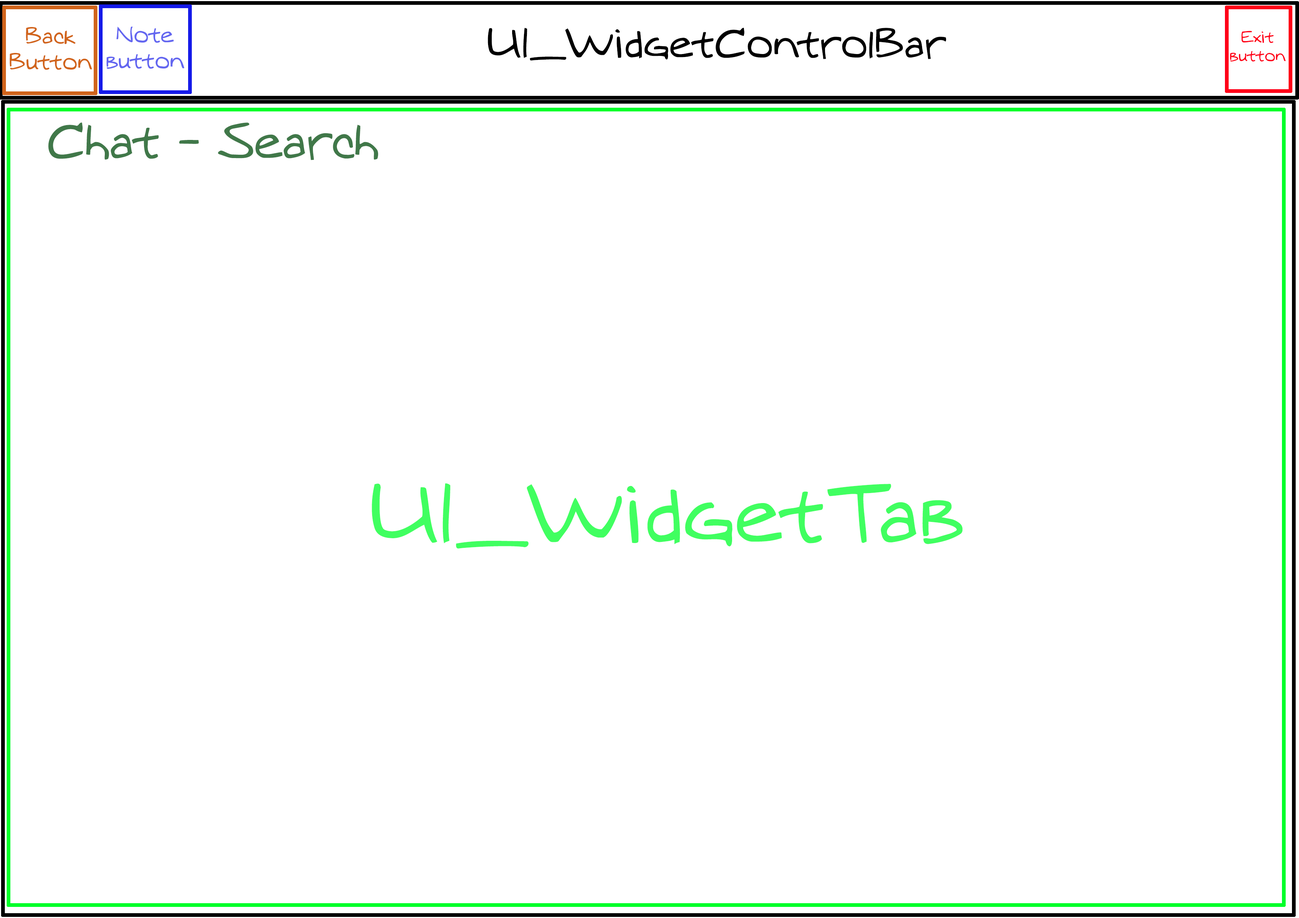
<style>
.page{position:relative;width:1299px;height:918px;background:#ffffff}
.page>*{position:absolute;margin:0}
.t1{font:21.6px "MTOaugie-Regular";color:#d1641b}
.t2{font:21.6px "MTOaugie-Regular";color:#6366f0}
.t3{font:38.6px "MTOaugie-Regular";color:#000000}
.t4{font:15.4px "MTOaugie-Regular";color:#ff0018}
.t5{font:46.3px "MTOaugie-Regular";color:#407849}
.t6{font:77.1px "MTOaugie-Regular";color:#40ff60}
</style>
<div class="page">
<p class="t1" style="left:10px;top:27px;width:82px;height:43px;text-align:center">Back Button</p>
<p class="t2" style="left:106px;top:26px;width:78px;height:43px;text-align:center">Note button</p>
<p class="t3" style="left:488px;top:28px;width:458px;height:33px">UI_WidgetControlBar</p>
<p class="t4" style="left:1230px;top:31px;width:55px;height:31px;text-align:center">Exit button</p>
<p class="t5" style="left:48px;top:123px;width:330px;height:37px">Chat - Search</p>
<p class="t6" style="left:372px;top:483px;width:591px;height:66px">UI_WidgetTab</p>
</div>
